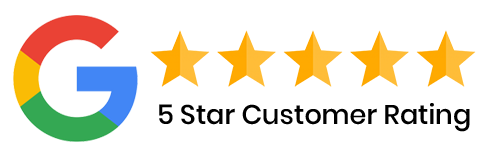
<style>
.page{position:relative;width:485px;height:156px;background:#ffffff}
.page>*{position:absolute;margin:0}
.t1{font:27px "Poppins-Medium";color:#000000}
</style>
<div class="page">
<p class="t1" style="left:159px;top:103px;width:311px;height:29px">5 Star Customer Rating</p>
</div>
